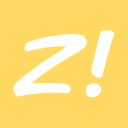
<style>
.page{position:relative;width:128px;height:128px;background:#ffd962}
.page>*{position:absolute;margin:0}
.t1{font:100px "Japan";letter-spacing:0.01em;color:#ffffff;font-style:italic}
</style>
<div class="page">
<p class="t1" style="left:13px;top:30px;width:102px;height:68px">Z!</p>
</div>
